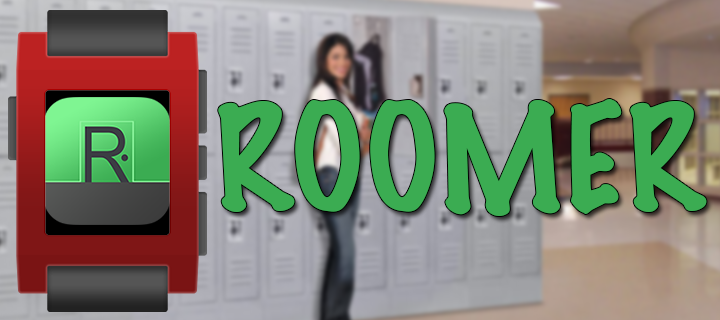
<style>
.page{position:relative;width:720px;height:320px}
.page>*{position:absolute;margin:0}
.t1{font:133.3px "MarkerFelt-Thin";color:#3bac52}
</style>
<div class="page">
<p class="t1" style="left:218px;top:99px;width:489px;height:117px">ROOMER</p>
</div>
